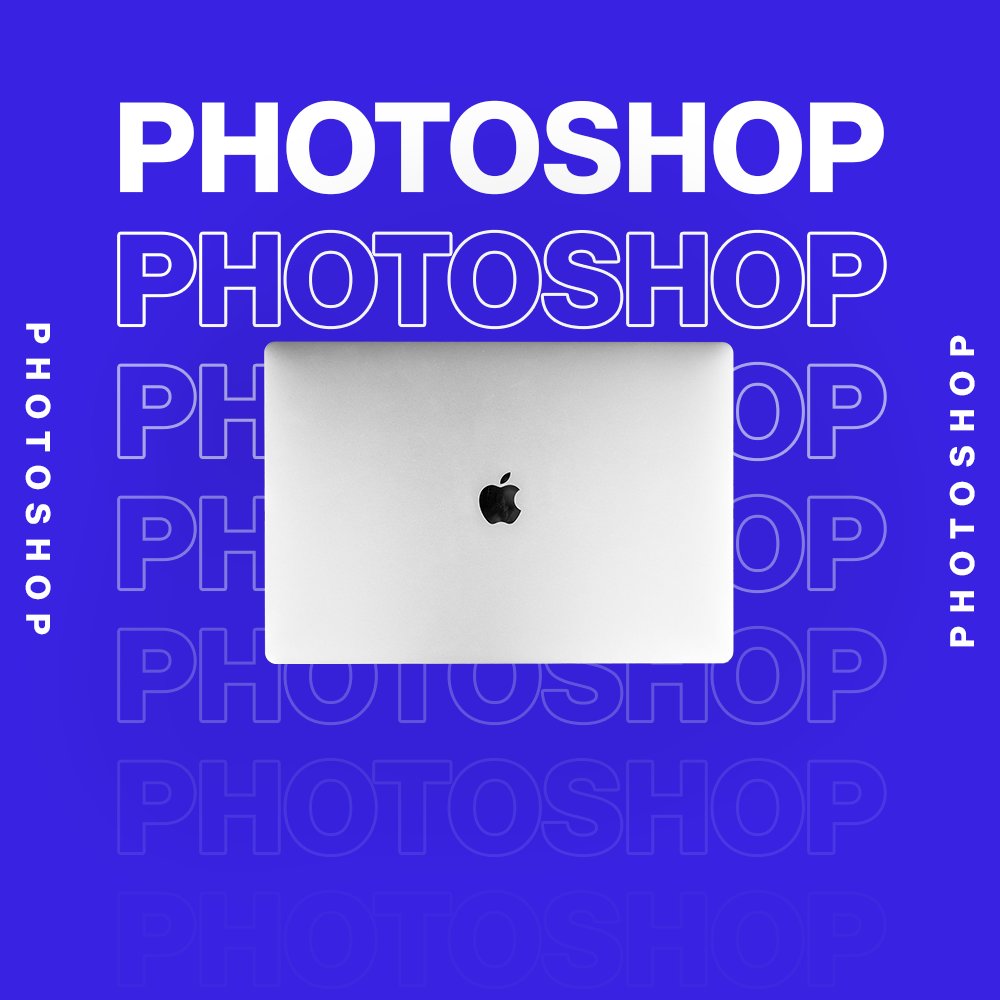
<style>
.page{position:relative;width:1000px;height:1000px;background:#3922e1}
.page>*{position:absolute;margin:0}
.t1{font:125px "NeueHaasDisplay-Bold";color:#ffffff}
.t2{font:125px "NeueHaasDisplay-Bold";color:#3721d8}
.t3{font:33.3px "NeueHaasDisplay-Bold";letter-spacing:0.4em;color:#ffffff}
.t4{font:125px "NeueHaasDisplay-Bold";color:#3821dd}
</style>
<div class="page">
<p class="t1" style="left:120px;top:100px;width:764px;height:95px">PHOTOSHOP</p>
<p class="t2" style="left:120px;top:232px;width:764px;height:95px">PHOTOSHOP</p>
<p class="t3" style="left:25px;top:323px;width:26px;height:312px;rotate:90deg">PHOTOSHOP</p>
<p class="t3" style="left:949px;top:335px;width:26px;height:312px;rotate:-90deg">PHOTOSHOP</p>
<p class="t4" style="left:120px;top:760px;width:764px;height:95px">PHOTOSHOP</p>
</div>
